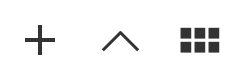
<style>
.page{position:relative;width:240px;height:80px;background:#ffffff}
.page>*{position:absolute;margin:0}
.t1{font:60px "Helvetica-Light";letter-spacing:0.02em;color:#333333}
</style>
<div class="page">
<p class="t1" style="left:25px;top:25px;width:30px;height:30px">+</p>
</div>
